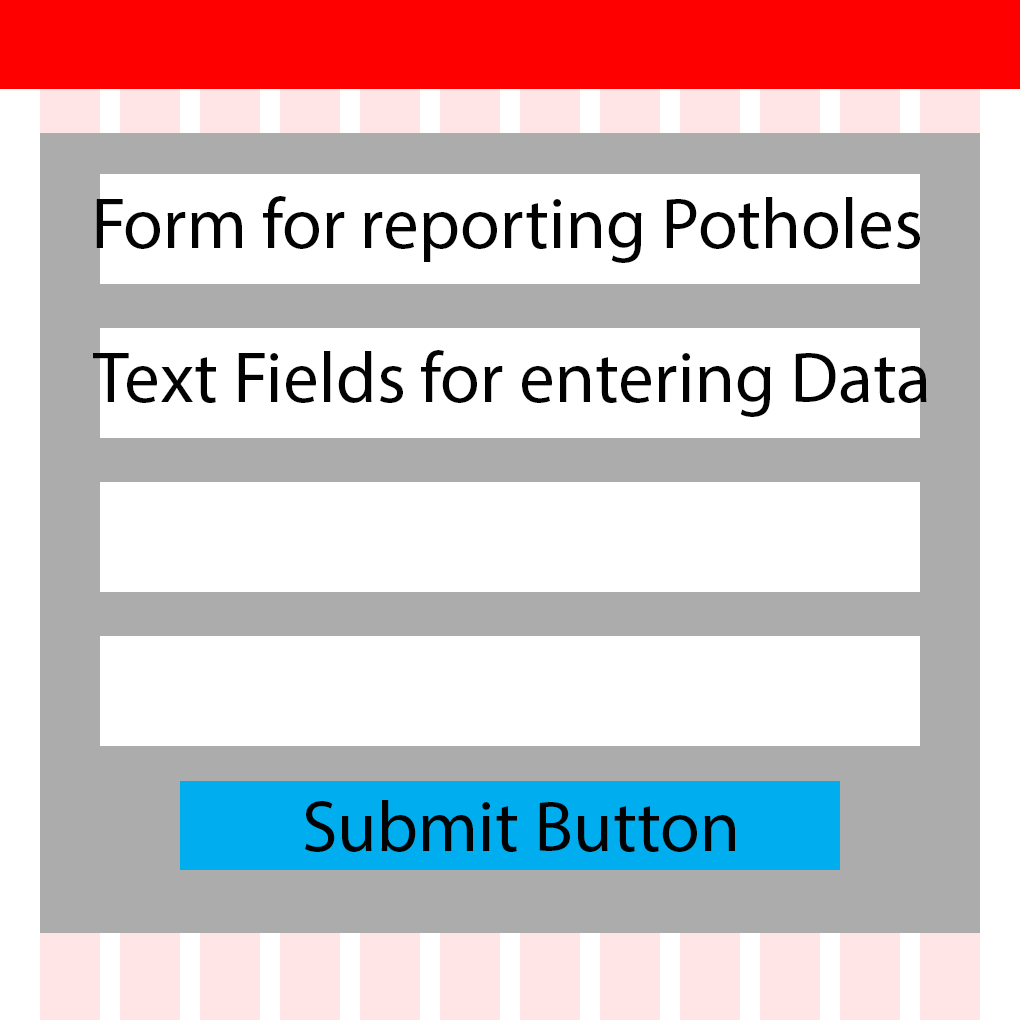
<style>
.page{position:relative;width:1020px;height:1020px;background:#ffffff}
.page>*{position:absolute;margin:0}
.t1{font:72px "MyriadPro-Regular";color:#020202}
</style>
<div class="page">
<p class="t1" style="left:96px;top:196px;width:824px;height:67px">Form for reporting Potholes</p>
<p class="t1" style="left:93px;top:350px;width:834px;height:67px">Text Fields for entering Data</p>
<p class="t1" style="left:305px;top:800px;width:430px;height:52px">Submit Button</p>
</div>
